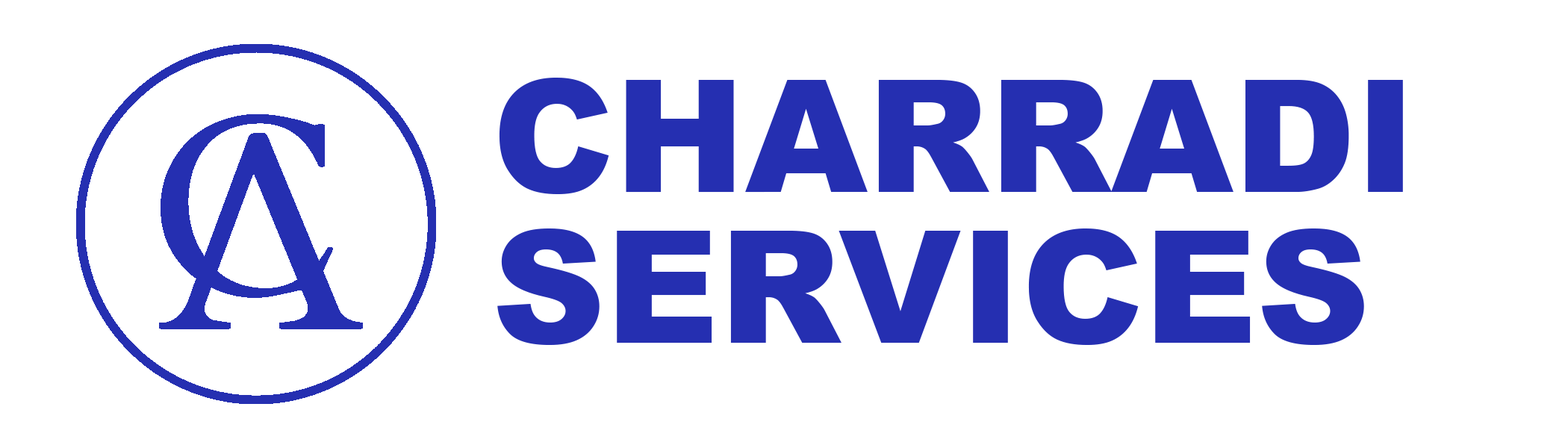
<style>
.page{position:relative;width:1568px;height:448px;background:#ffffff}
.page>*{position:absolute;margin:0}
.t1{font:157px/150.3px "Arial-Black";color:#252fb1}
</style>
<div class="page">
<p class="t1" style="left:497px;top:78px;width:906px;height:267px">CHARRADI <br>SERVICES</p>
</div>
